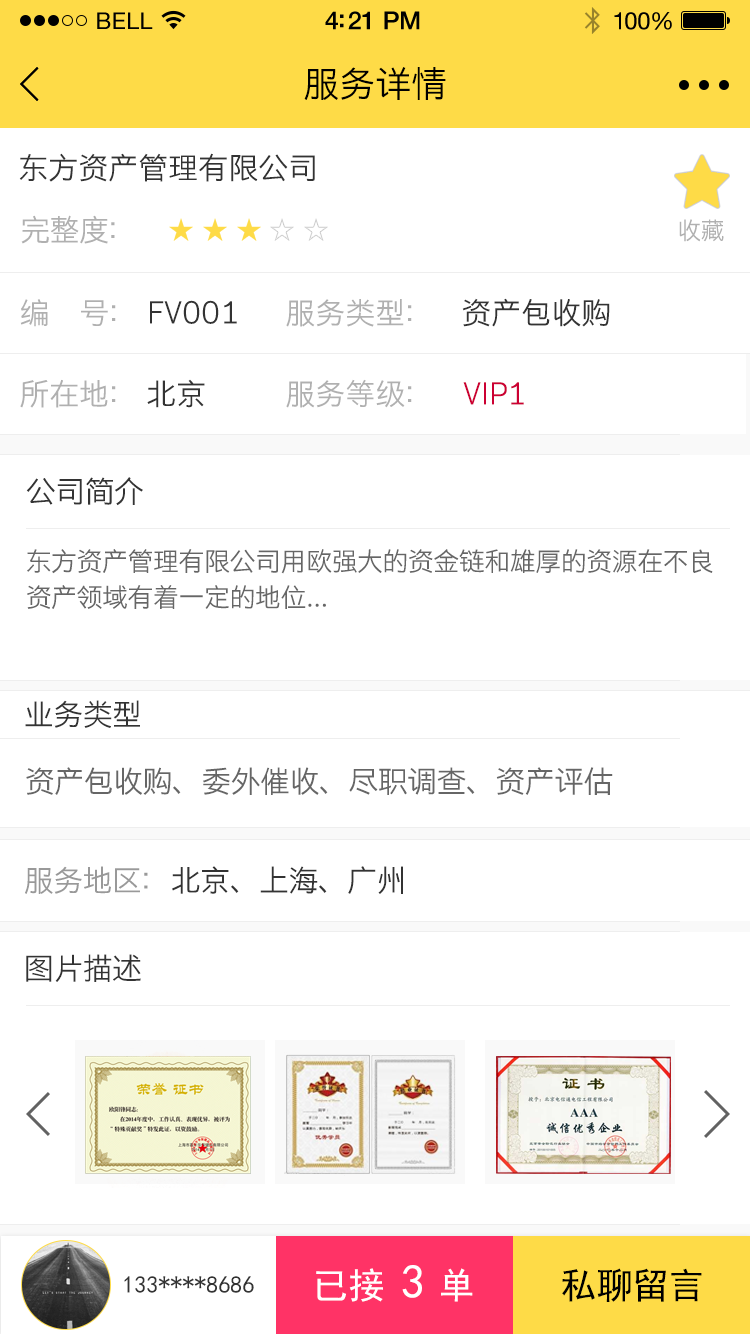
<style>
.page{position:relative;width:750px;height:1334px;background:#ffffff}
.page>*{position:absolute;margin:0}
.t1{font:23px "HelveticaNeue";letter-spacing:0.02em;color:#000000}
.t2{font:25px "HelveticaNeue-Medium";letter-spacing:-0.02em;color:#000000}
.t3{font:24px "HelveticaNeue";letter-spacing:-0.02em;color:#010101}
.t4{font:36px "STHeitiSC-Light";color:#000000}
.t5{font:30px "STHeitiSC-Light";color:#333333}
.t6{font:30px "STHeitiSC-Light";letter-spacing:-0.02em;color:#b0b0b0}
.t7{font:24px "STHeitiSC-Light";letter-spacing:-0.02em;color:#b0b0b0}
.t8{font:30px "STHeitiSC-Light";color:#b0b0b0}
.t9{font:30px "STHeitiSC-Light";color:#cc0033}
.t10{font:30px "STHeitiSC-Light";letter-spacing:-0.02em;color:#333333}
.t11{font:26px/36px "STHeitiSC-Light";letter-spacing:-0.02em;color:#666666}
.t12{font:30px "STHeitiSC-Light";letter-spacing:-0.02em;color:#666666}
.t13{font:30px "STHeitiSC-Light";letter-spacing:-0.02em;color:#999999}
.t14{font:48px "SimHei";color:#ffffff}
.t15{font:24px "SimHei";color:#333333}
.t16{font:36px "SimHei";color:#ffffff}
.t17{font:36px "SimHei";color:#000000}
</style>
<div class="page">
<p class="t1" style="left:97px;top:12px;width:56px;height:17px">BELL</p>
<p class="t1" style="left:97px;top:12px;width:56px;height:17px">BELL</p>
<p class="t2" style="left:325px;top:11px;width:95px;height:19px">4:21 PM</p>
<p class="t2" style="left:325px;top:11px;width:95px;height:19px">4:21 PM</p>
<p class="t3" style="left:614px;top:12px;width:58px;height:18px">100%</p>
<p class="t3" style="left:614px;top:12px;width:58px;height:18px">100%</p>
<p class="t4" style="left:304px;top:67px;width:142px;height:33px">服务详情</p>
<p class="t5" style="left:19px;top:153px;width:296px;height:29px">东方资产管理有限公司</p>
<p class="t6" style="left:21px;top:215px;width:94px;height:29px">完整度：</p>
<p class="t7" style="left:679px;top:219px;width:45px;height:23px">收藏</p>
<p class="t8" style="left:20px;top:299px;width:96px;height:28px">编     号：</p>
<p class="t5" style="left:150px;top:300px;width:87px;height:24px">FV001</p>
<p class="t8" style="left:286px;top:299px;width:126px;height:28px">服务类型：</p>
<p class="t5" style="left:462px;top:298px;width:148px;height:29px">资产包收购</p>
<p class="t8" style="left:20px;top:379px;width:96px;height:29px">所在地：</p>
<p class="t5" style="left:147px;top:379px;width:58px;height:29px">北京</p>
<p class="t8" style="left:286px;top:379px;width:126px;height:29px">服务等级：</p>
<p class="t9" style="left:463px;top:382px;width:61px;height:23px">VIP1</p>
<p class="t10" style="left:26px;top:477px;width:117px;height:29px">公司简介</p>
<p class="t11" style="left:27px;top:549px;width:686px;height:60px">东方资产管理有限公司用欧强大的资金链和雄厚的资源在不良<br>资产领域有着一定的地位...</p>
<p class="t10" style="left:25px;top:700px;width:115px;height:28px">业务类型</p>
<p class="t12" style="left:26px;top:767px;width:587px;height:28px">资产包收购、委外催收、尽职调查、资产评估</p>
<p class="t10" style="left:25px;top:866px;width:378px;height:28px"><span class="t13">服务地区：</span>北京、上海、广州</p>
<p class="t10" style="left:26px;top:954px;width:115px;height:28px">图片描述</p>
<p class="t14" style="left:402px;top:1265px;width:20px;height:33px">3</p>
<p class="t15" style="left:124px;top:1276px;width:130px;height:17px">133****8686</p>
<p class="t16" style="left:316px;top:1268px;width:157px;height:34px">已接   单</p>
<p class="t17" style="left:562px;top:1268px;width:140px;height:34px">私聊留言</p>
</div>
